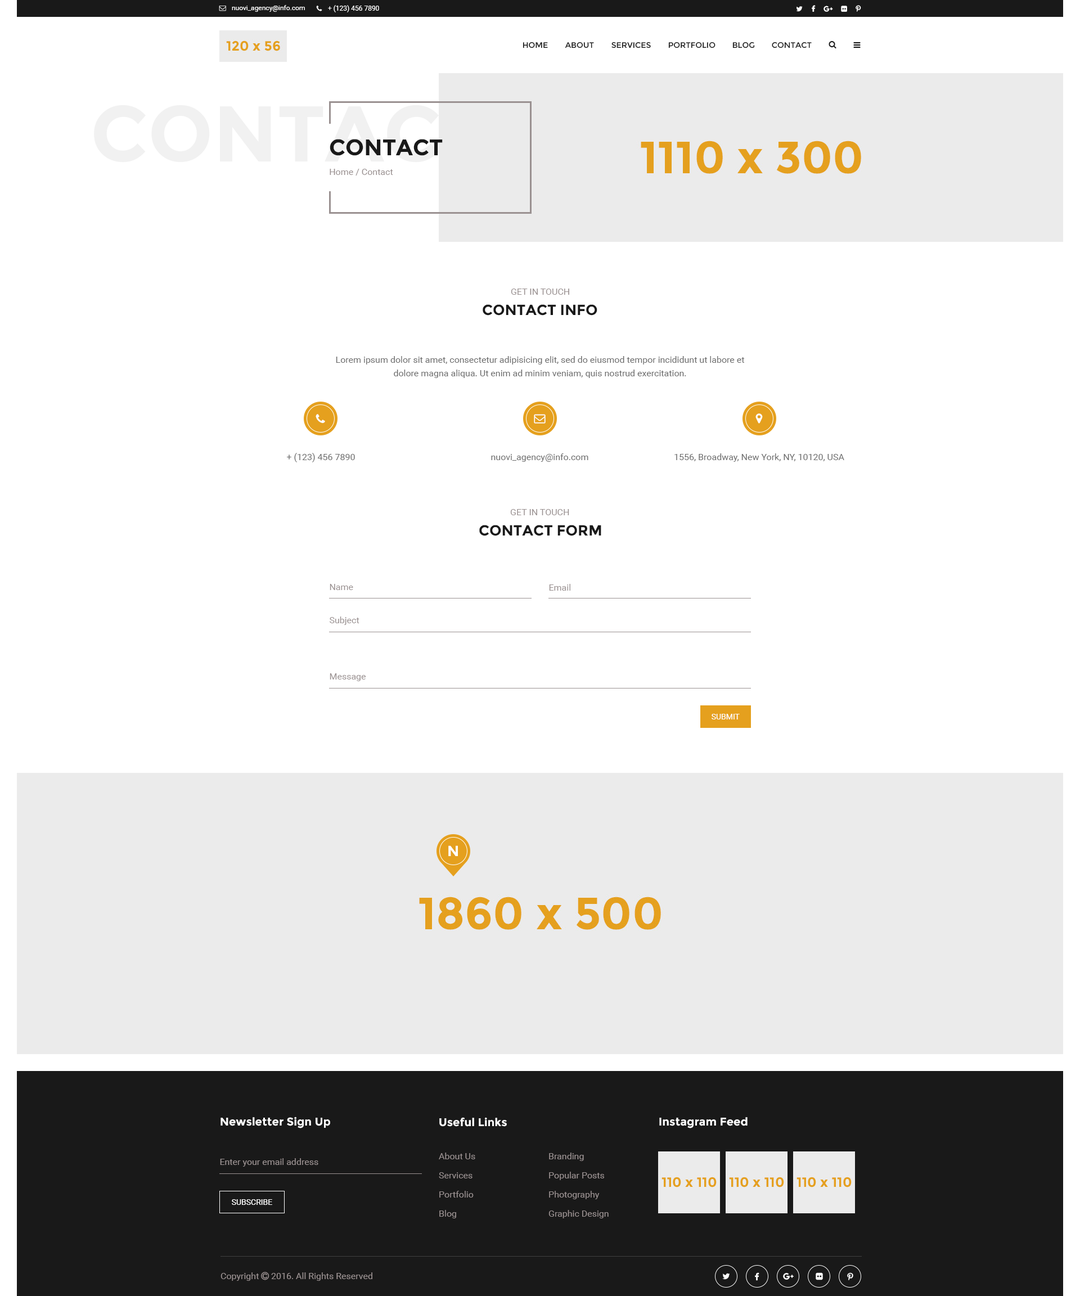
<style>
.page{position:relative;width:1080px;height:1296px;background:#ffffff}
.page>*{position:absolute;margin:0}
.t1{font:6.8px "Roboto-Regular";color:#ffffff}
.t2{font:7.9px "Montserrat-Regular";color:#191919}
.t3{font:22.5px "Montserrat-Bold";color:#191919}
.t4{font:9px "Roboto-Regular";color:#9a9191}
.t5{font:14.6px "Montserrat-Bold";color:#191919}
.t6{font:9px/13.5px "Roboto-Regular";color:#6c6c6c}
.t7{font:9px "Roboto-Regular";color:#6c6c6c}
.t8{font:7.9px "Roboto-Regular";color:#ffffff}
.t9{font:14.6px "Montserrat-Bold";color:#ffffff}
.t10{font:11.2px "Montserrat-Bold";color:#ffffff}
</style>
<div class="page">
<p class="t1" style="left:232px;top:5px;width:73px;height:7px">nuovi_agency@info.com</p>
<p class="t1" style="left:328px;top:5px;width:51px;height:7px">+ (123) 456 7890</p>
<p class="t2" style="left:523px;top:42px;width:25px;height:6px">HOME</p>
<p class="t2" style="left:565px;top:42px;width:29px;height:6px">ABOUT</p>
<p class="t2" style="left:611px;top:42px;width:40px;height:6px">SERVICES</p>
<p class="t2" style="left:668px;top:42px;width:48px;height:6px">PORTFOLIO</p>
<p class="t2" style="left:732px;top:42px;width:23px;height:6px">BLOG</p>
<p class="t2" style="left:772px;top:42px;width:40px;height:6px">CONTACT</p>
<p class="t3" style="left:330px;top:139px;width:113px;height:17px">CONTACT</p>
<p class="t4" style="left:330px;top:169px;width:63px;height:7px">Home / Contact</p>
<p class="t4" style="left:511px;top:289px;width:58px;height:6px">GET IN TOUCH</p>
<p class="t5" style="left:483px;top:304px;width:114px;height:12px">CONTACT INFO</p>
<p class="t6" style="left:336px;top:356px;width:408px;height:22px;text-align:center">Lorem ipsum dolor sit amet, consectetur adipisicing elit, sed do eiusmod tempor incididunt ut labore et dolore magna aliqua. Ut enim ad minim veniam, quis nostrud exercitation.</p>
<p class="t7" style="left:287px;top:453px;width:68px;height:9px">+ (123) 456 7890</p>
<p class="t7" style="left:491px;top:453px;width:97px;height:9px">nuovi_agency@info.com</p>
<p class="t7" style="left:674px;top:453px;width:170px;height:9px">1556, Broadway, New York, NY, 10120, USA</p>
<p class="t4" style="left:510px;top:509px;width:59px;height:6px">GET IN TOUCH</p>
<p class="t5" style="left:479px;top:525px;width:122px;height:11px">CONTACT FORM</p>
<p class="t4" style="left:330px;top:584px;width:23px;height:6px">Name</p>
<p class="t4" style="left:549px;top:584px;width:21px;height:7px">Email</p>
<p class="t4" style="left:330px;top:616px;width:29px;height:9px">Subject</p>
<p class="t4" style="left:330px;top:673px;width:36px;height:8px">Message</p>
<p class="t8" style="left:712px;top:714px;width:28px;height:5px">SUBMIT</p>
<p class="t9" style="left:448px;top:845px;width:10px;height:11px">N</p>
<p class="t10" style="left:220px;top:1117px;width:110px;height:11px">Newsletter Sign Up</p>
<p class="t10" style="left:439px;top:1117px;width:68px;height:10px">Useful Links</p>
<p class="t10" style="left:659px;top:1117px;width:89px;height:11px">Instagram Feed</p>
<p class="t4" style="left:439px;top:1153px;width:36px;height:6px">About Us</p>
<p class="t4" style="left:549px;top:1153px;width:35px;height:8px">Branding</p>
<p class="t4" style="left:220px;top:1158px;width:98px;height:9px">Enter your email address</p>
<p class="t4" style="left:439px;top:1172px;width:33px;height:6px">Services</p>
<p class="t4" style="left:549px;top:1172px;width:55px;height:8px">Popular Posts</p>
<p class="t4" style="left:439px;top:1191px;width:35px;height:7px">Portfolio</p>
<p class="t4" style="left:549px;top:1191px;width:51px;height:8px">Photography</p>
<p class="t8" style="left:232px;top:1199px;width:40px;height:6px">SUBSCRIBE</p>
<p class="t4" style="left:439px;top:1210px;width:17px;height:8px">Blog</p>
<p class="t4" style="left:548px;top:1210px;width:61px;height:8px">Graphic Design</p>
</div>
